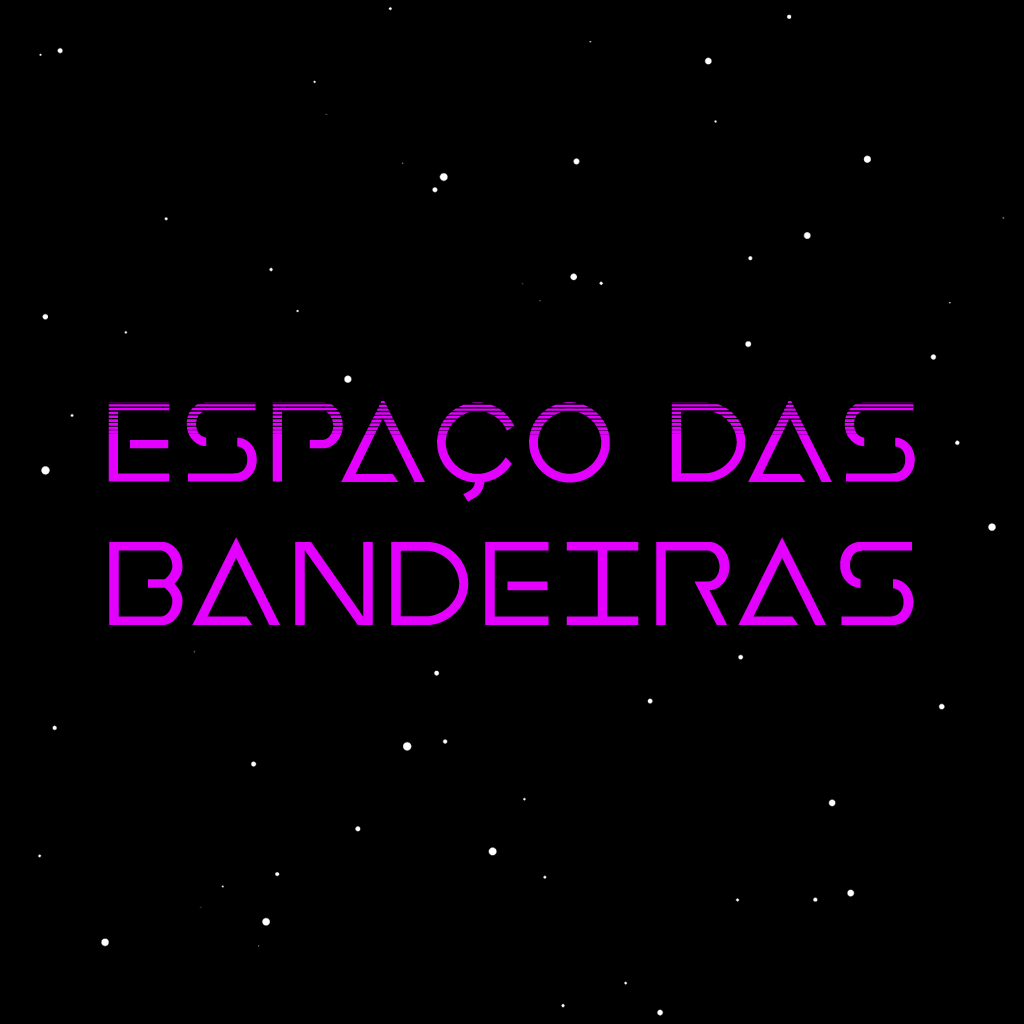
<style>
.page{position:relative;width:1024px;height:1024px;background:#000000}
.page>*{position:absolute;margin:0}
.t1{font:127.3px "EarthOrbiterHalftone";color:#e400ff}
.t2{font:133.3px "EarthOrbiter";color:#e400ff}
</style>
<div class="page">
<p class="t1" style="left:108px;top:398px;width:807px;height:104px">ESPAÇO DAS</p>
<p class="t2" style="left:109px;top:537px;width:805px;height:88px">BANDEIRAS</p>
</div>
